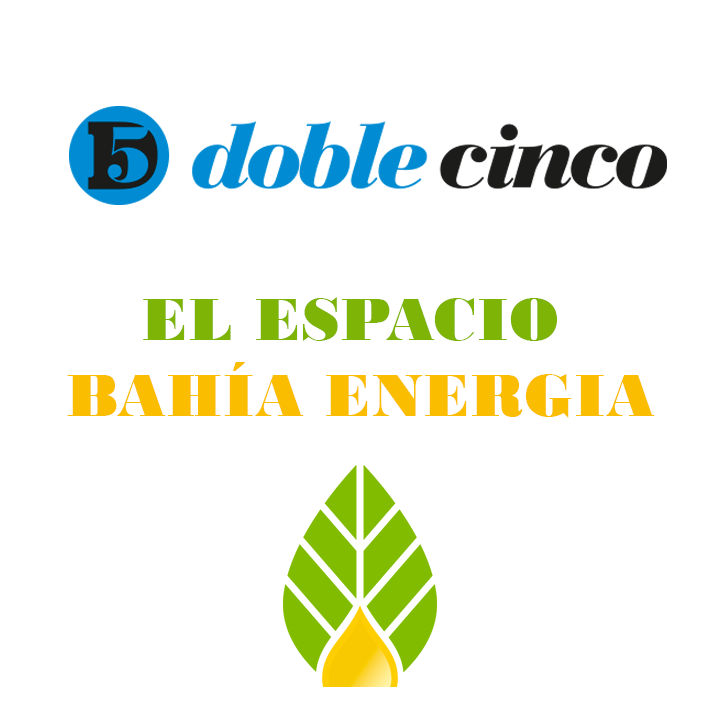
<style>
.page{position:relative;width:720px;height:720px;background:#ffffff}
.page>*{position:absolute;margin:0}
.t1{font:63.3px "BodoniMTBlack";color:#fbbd00}
.t2{font:63.3px "BodoniMTBlack";color:#7eb406}
</style>
<div class="page">
<p class="t1" style="left:67px;top:297px;width:588px;height:121px;text-align:center"><span class="t2">EL ESPACIO <br></span>BAHÍA ENERGIA</p>
</div>
